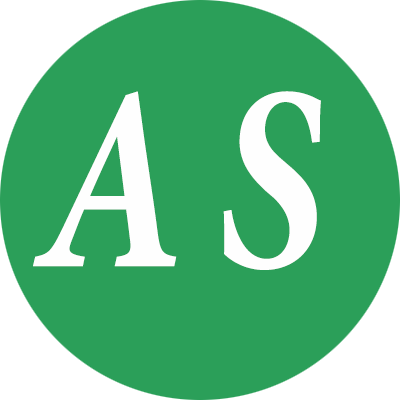
<style>
.page{position:relative;width:400px;height:400px;background:#2b9f59}
.page>*{position:absolute;margin:0}
.t1{font:367.4px "AdobeArabic-BoldItalic";letter-spacing:0.12em;color:#fefefe;scale:0.81 1}
</style>
<div class="page">
<p class="t1" style="left:33px;top:91px;width:288px;height:179px">AS</p>
</div>
